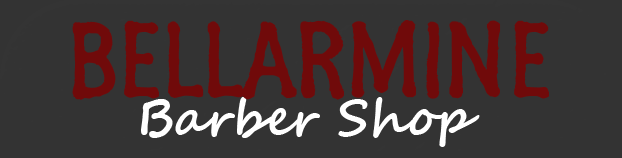
<style>
.page{position:relative;width:622px;height:158px;background:#333333}
.page>*{position:absolute;margin:0}
.t1{font:108.3px "SegoeMarker";letter-spacing:-0.02em;color:#700a0a}
.t2{font:12px "SegoeScript-Bold";color:#ffffff}
</style>
<div class="page">
<p class="t1" style="left:72px;top:20px;width:477px;height:80px">BELLARMINE</p>
<p class="t2" style="left:141px;top:97px;width:339px;height:50px">Barber Shop</p>
</div>
